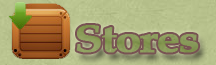
<style>
.page{position:relative;width:216px;height:65px}
.page>*{position:absolute;margin:0}
.t1{font:39.4px "PalatinoLinotype-Bold";letter-spacing:-0.055em;color:#8a9b5b;font-weight:bold;scale:1.17 1}
</style>
<div class="page">
<p class="t1" style="left:76px;top:25px;width:123px;height:28px">Stores</p>
</div>
